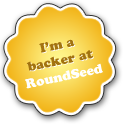
<style>
.page{position:relative;width:128px;height:128px;background:#ffffff}
.page>*{position:absolute;margin:0}
.t1{font:13px "CooperBlackStd"}
.t2{font:13px "CooperBlackStd";color:#a3730f}
</style>
<div class="page">
<p class="t1" style="left:25px;top:40px;width:78px;height:49px;text-align:center;rotate:-12deg">I’m a<br>backer at<br>RoundSeed</p>
<p class="t2" style="left:26px;top:39px;width:67px;height:32px;text-align:center;rotate:-12deg">I’m a<br>backer at</p>
</div>
